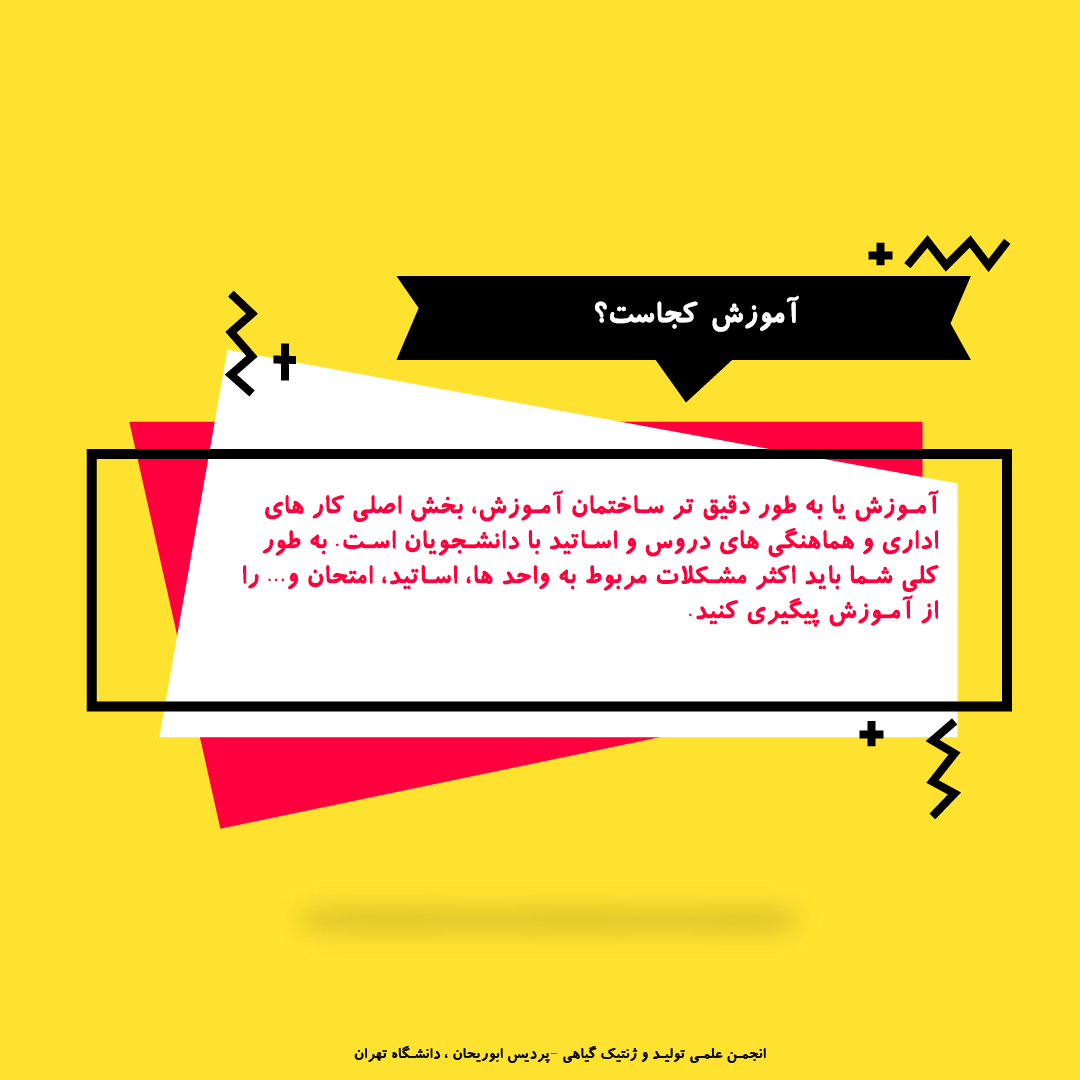
<style>
.page{position:relative;width:1080px;height:1080px;background:#ffe22f}
.page>*{position:absolute;margin:0}
.t1{font:33.3px "SabaBold";letter-spacing:0.025em;color:#ffffff}
.t2{font:29.2px "SabaBold";letter-spacing:0.025em;color:#ff003e}
</style>
<div class="page">
<p class="t1" style="left:595px;top:295px;width:204px;height:37px">آموزش کجاست؟</p>
<p class="t2" style="left:243px;top:490px;width:696px;height:137px">آموزش یا به طور دقیق تر ساختمان آموزش، بخش اصلی کار های اداری و هماهنگی های دروس و اساتید با دانشجویان است. به طور کلی شما باید اکثر مشکلات مربوط به واحد ها، اساتید، امتحان و... را از آموزش پیگیری کنید.</p>
</div>
